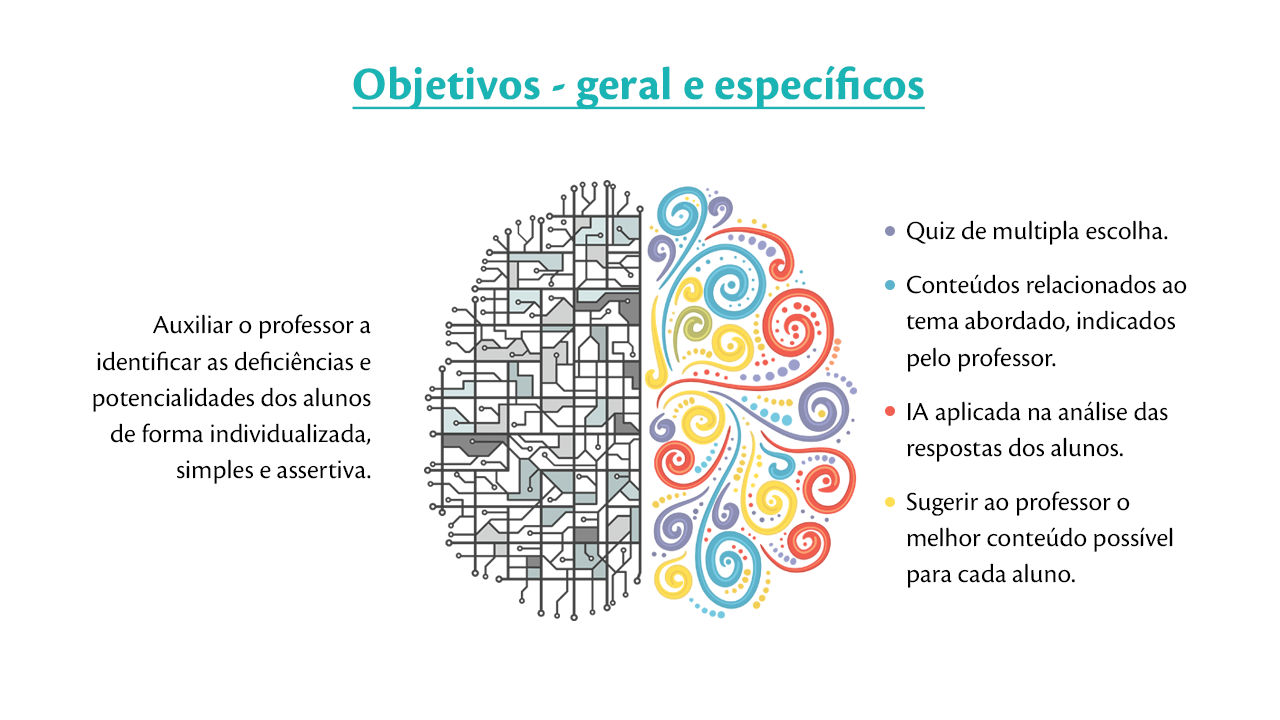
<style>
.page{position:relative;width:1280px;height:720px;background:#ffffff}
.page>*{position:absolute;margin:0}
.t1{font:48px "CronosPro-Bold";color:#1ab4b4;text-decoration:underline}
.t2{font:27px/36px "CronosPro-Regular";color:#000000}
.t3{font:27px/18px "CronosPro-Regular";color:#000000}
</style>
<div class="page">
<p class="t1" style="left:352px;top:66px;width:573px;height:44px">Objetivos - geral e específicos</p>
<p class="t2" style="left:906px;top:220px;width:281px;height:368px"><span class="t3">Quiz de multipla escolha.<br><br></span>Conteúdos relacionados ao tema abordado, indicados pelo professor.<br><span class="t3"><br><br>IA aplicada na análise das resp</span>ostas dos alunos.<br><span class="t3"><br>Su</span>gerir ao professor o melhor conteúdo possível para cada aluno.</p>
<p class="t2" style="left:93px;top:314px;width:278px;height:170px;text-align:right">Auxiliar o professor a identificar as deficiências e potencialidades dos alunos de forma individualizada, simples e assertiva.</p>
</div>
